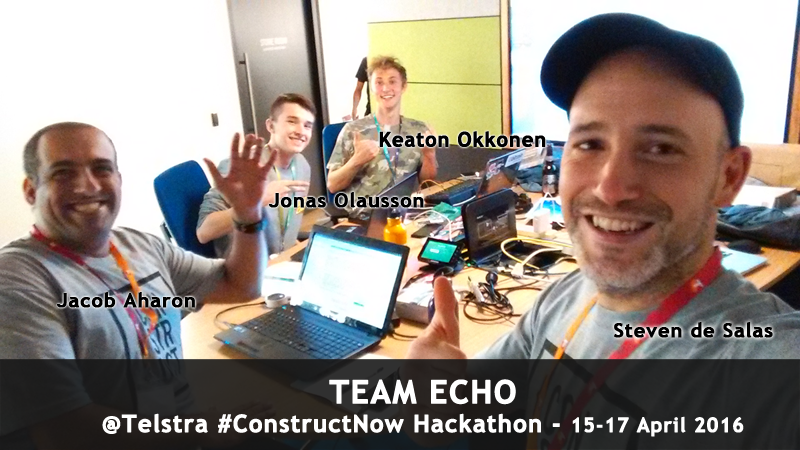
<style>
.page{position:relative;width:800px;height:450px}
.page>*{position:absolute;margin:0}
.t1{font:20px "TrebuchetMS-Bold";letter-spacing:0.025em;color:#000000;font-weight:bold}
.t2{font:24px "TrebuchetMS-Bold";letter-spacing:0.025em;color:#ffffff;font-weight:bold}
.t3{font:32px "TrebuchetMS-Bold";letter-spacing:0.025em;color:#ffffff;font-weight:bold}
.t4{font:20px "TrebuchetMS-Bold";letter-spacing:0.025em;color:#ffffff;font-weight:bold}
</style>
<div class="page">
<p class="t1" style="left:379px;top:131px;width:167px;height:16px">Keaton Okkonen</p>
<p class="t1" style="left:269px;top:192px;width:155px;height:16px">Jonas Olausson</p>
<p class="t1" style="left:57px;top:292px;width:138px;height:16px">Jacob Aharon</p>
<p class="t1" style="left:614px;top:322px;width:159px;height:16px">Steven de Salas</p>
<p class="t2" style="left:102px;top:379px;width:642px;height:58px;text-align:center"><span class="t3">TEAM ECHO<br></span>@Telstra #ConstructNow Hackathon - <span class="t4">15-17 April 2016</span></p>
</div>
